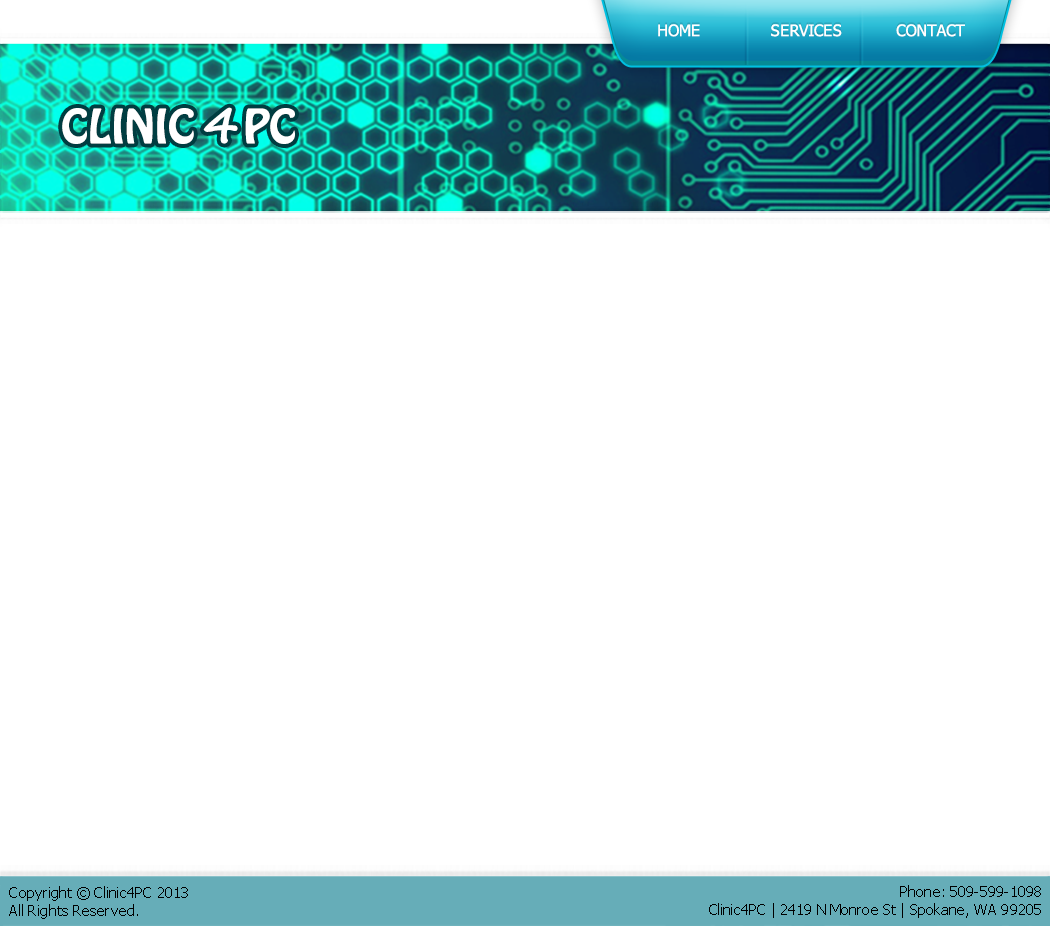
<style>
.page{position:relative;width:1050px;height:926px;background:#ffffff}
.page>*{position:absolute;margin:0}
.t1{font:16px "Tahoma";color:#ffffff;text-transform:uppercase}
.t2{font:42px "HoboStd";color:#ffffff;text-transform:uppercase}
.t3{font:48.6px "SegoePrint-Bold";color:#ffffff;text-transform:uppercase}
.t4{font:15px "Tahoma";color:#000000}
</style>
<div class="page">
<p class="t1" style="left:658px;top:24px;width:307px;height:13px">HOME             SERVICES          Contact</p>
<p class="t2" style="left:62px;top:108px;width:233px;height:36px">Clinic    PC</p>
<p class="t3" style="left:203px;top:107px;width:35px;height:37px">4</p>
<p class="t4" style="left:9px;top:886px;width:179px;height:33px">Copyright © Clinic4PC 2013<br>All Rights Reserved.</p>
<p class="t4" style="left:709px;top:885px;width:332px;height:33px;text-align:right">Phone: 509-599-1098<br>Clinic4PC | 2419 N Monroe St | Spokane, WA 99205</p>
</div>
